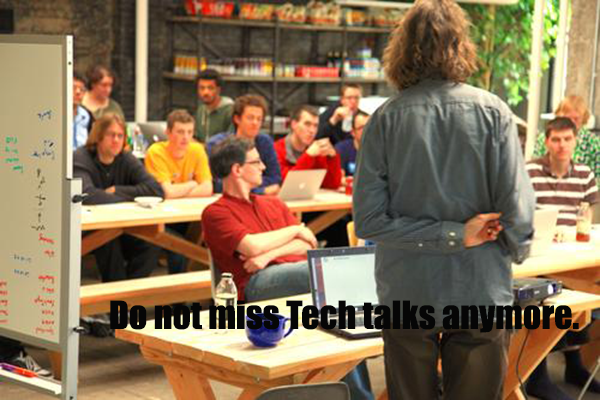
<style>
.page{position:relative;width:600px;height:400px}
.page>*{position:absolute;margin:0}
.t1{font:36px "Impact";color:#060606}
</style>
<div class="page">
<p class="t1" style="left:110px;top:300px;width:469px;height:33px">Do not miss Tech talks anymore.</p>
</div>
